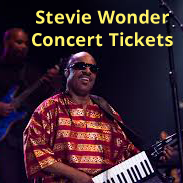
<style>
.page{position:relative;width:183px;height:183px}
.page>*{position:absolute;margin:0}
.t1{font:18px "OpenSans-Bold";letter-spacing:0.018em;color:#fff468}
</style>
<div class="page">
<p class="t1" style="left:36px;top:9px;width:133px;height:15px">Stevie Wonder</p>
<p class="t1" style="left:32px;top:32px;width:141px;height:15px">Concert Tickets</p>
</div>
